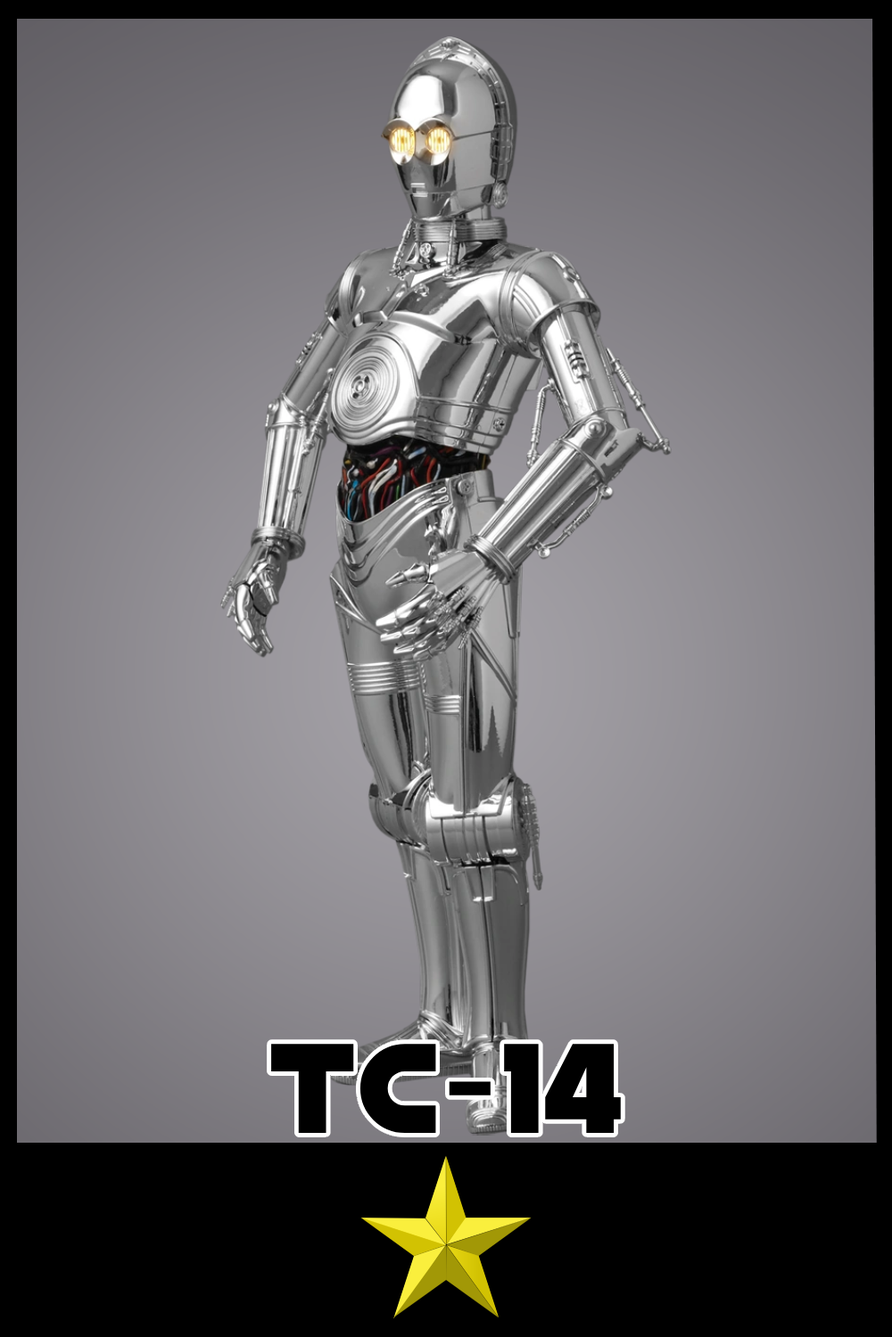
<style>
.page{position:relative;width:892px;height:1337px}
.page>*{position:absolute;margin:0}
.t1{font:137px "DistantGalaxy";color:#000000}
</style>
<div class="page">
<p class="t1" style="left:271px;top:1044px;width:350px;height:89px">tc-14</p>
</div>
